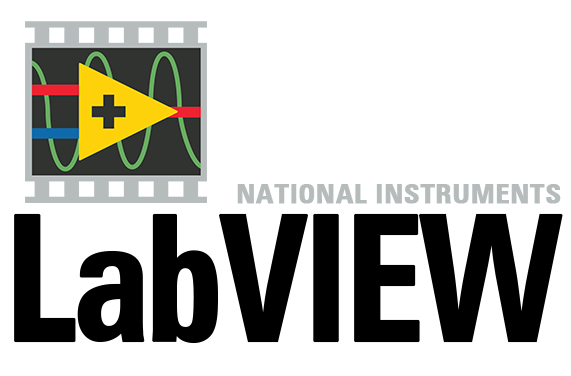
<style>
.page{position:relative;width:571px;height:376px;background:#ffffff}
.page>*{position:absolute;margin:0}
.t1{font:26px "ZurichBT-BoldCondensed";color:#b6bbbc;font-weight:bold;scale:1.1 1}
.t2{font:173.9px "ZurichBT-BoldCondensed";letter-spacing:-0.05em;color:#000000;font-weight:bold;scale:0.92 1}
</style>
<div class="page">
<p class="t1" style="left:237px;top:184px;width:324px;height:20px">NATIONAL INSTRUMENTS</p>
<p class="t2" style="left:14px;top:213px;width:549px;height:131px">LabVIEW</p>
</div>
